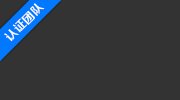
<style>
.page{position:relative;width:180px;height:100px;background:#333333}
.page>*{position:absolute;margin:0}
.t1{font:12px "FZZZHONGJW--GB1-0";color:#ffffff}
</style>
<div class="page">
<p class="t1" style="left:4px;top:3px;width:41px;height:39px;rotate:-45deg">认证团队</p>
</div>
